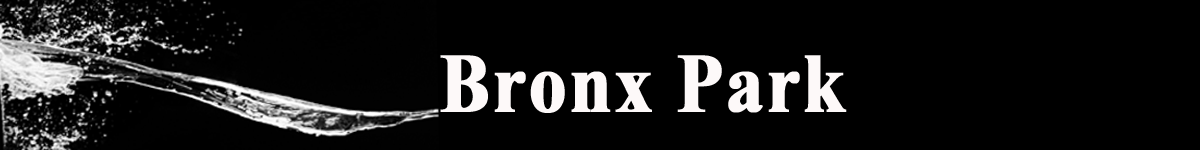
<style>
.page{position:relative;width:1200px;height:150px;background:#000000}
.page>*{position:absolute;margin:0}
.t1{font:84.1px "TimesNewRomanPS-BoldMT";letter-spacing:0.02em;color:#fdf9f9;font-weight:bold;scale:0.89 1}
</style>
<div class="page">
<p class="t1" style="left:440px;top:55px;width:407px;height:58px">Bronx Park</p>
</div>
